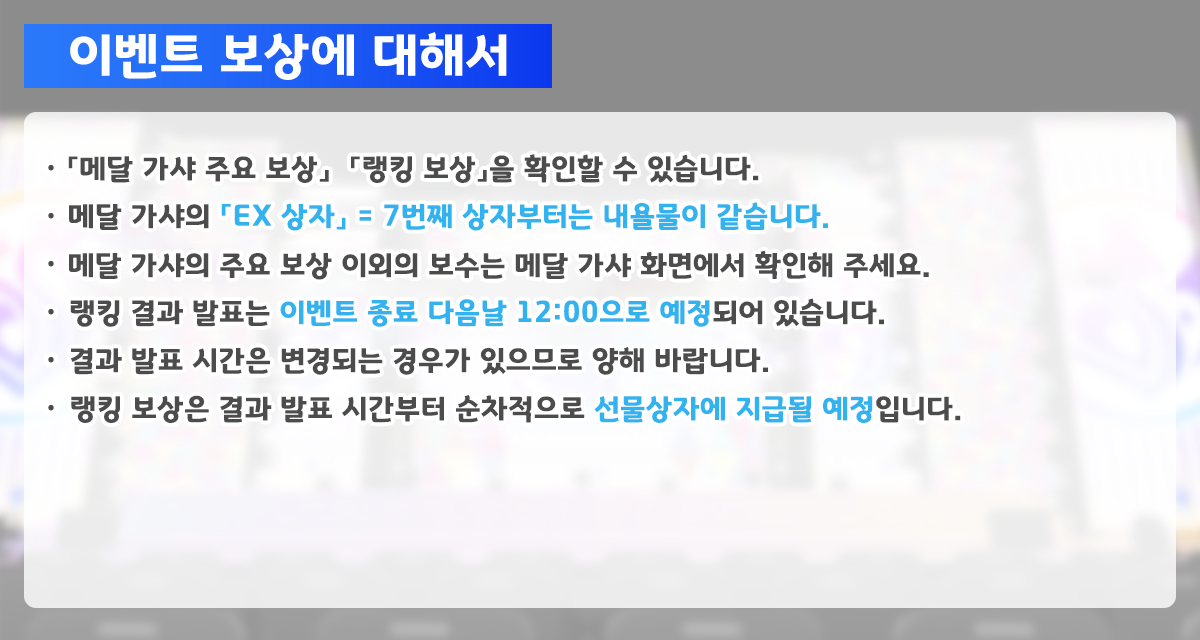
<style>
.page{position:relative;width:1200px;height:640px}
.page>*{position:absolute;margin:0}
.t1{font:50.7px "GyeonggiTitleB";letter-spacing:0.03em;color:#ffffff}
.t2{font:29.3px "GyeonggiTitleB";letter-spacing:0.03em;color:#4c4c4c}
.t3{font:29.3px "GyeonggiTitleB";letter-spacing:0.03em;color:#32b3ef}
</style>
<div class="page">
<p class="t1" style="left:70px;top:32px;width:437px;height:48px">이벤트 보상에 대해서</p>
<p class="t2" style="left:68px;top:154px;width:691px;height:29px">「메달 가샤 주요 보상」  「랭킹 보상」을 확인할 수 있습니다.</p>
<p class="t3" style="left:69px;top:202px;width:759px;height:29px"><span class="t2">메달 가샤의 </span>「EX 상자」 = 7번째 상자부터는 내욜물이 같습니다.</p>
<p class="t2" style="left:69px;top:250px;width:860px;height:30px">메달 가샤의 주요 보상 이외의 보수는 메달 가샤 화면에서 확인해 주세요.</p>
<p class="t3" style="left:70px;top:298px;width:814px;height:29px"><span class="t2">랭킹 결과 발표는 </span>이벤트 종료 다음날 12:00으로 예정<span class="t2">되어 있습니다.</span></p>
<p class="t2" style="left:71px;top:347px;width:697px;height:28px">결과 발표 시간은 변경되는 경우가 있으므로 양해 바랍니다.</p>
<p class="t2" style="left:71px;top:395px;width:890px;height:28px">랭킹 보상은 결과 발표 시간부터 순차적으로 <span class="t3">선물상자에 지급될 예정</span>입니다.</p>
</div>
